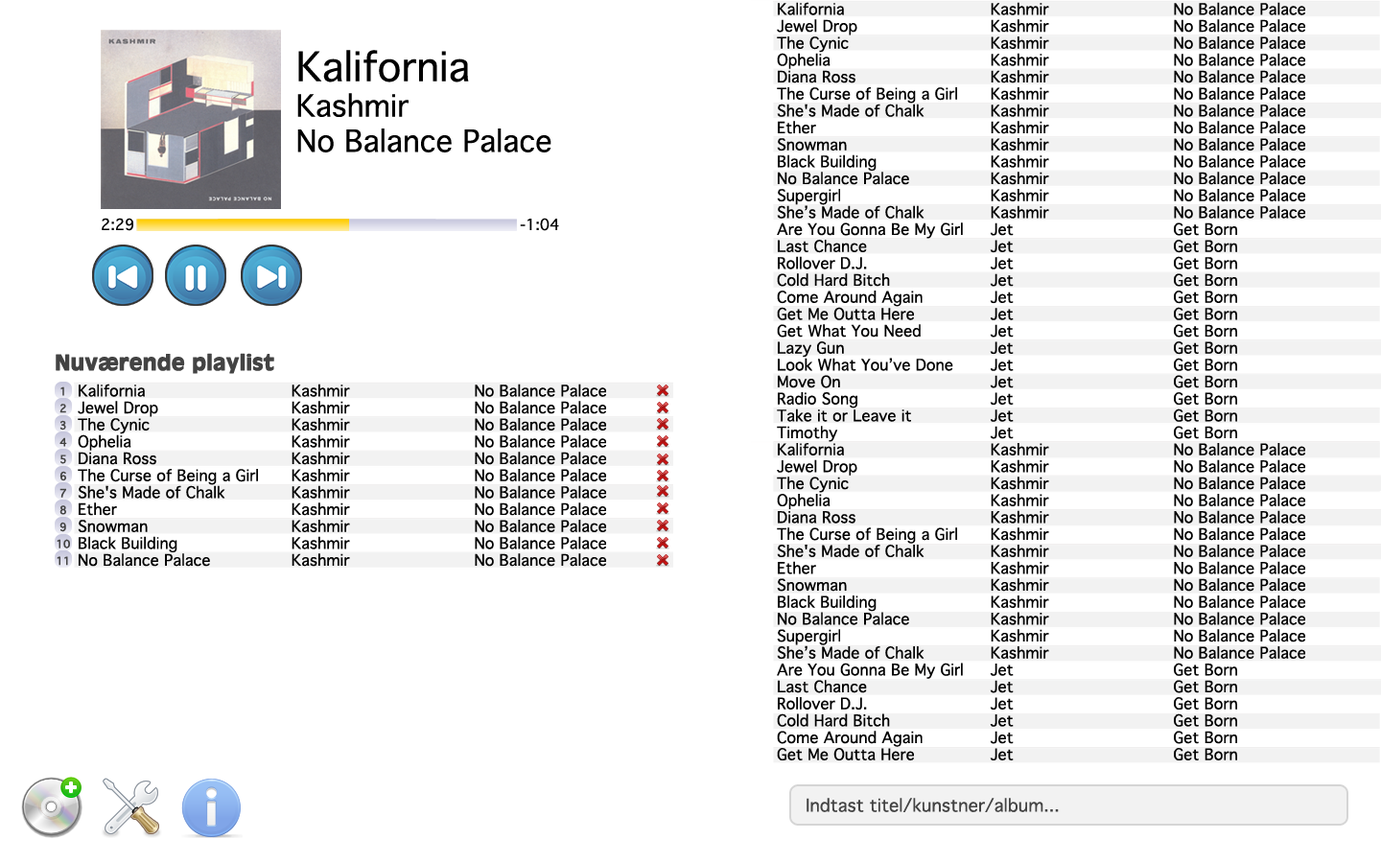
<style>
.page{position:relative;width:1381px;height:863px;background:#ffffff}
.page>*{position:absolute;margin:0}
.t1{font:15.3px/16.9px "Thonburi";color:#000000}
.t2{font:29.4px "Thonburi";color:#000000}
.t3{font:39.2px "Thonburi";color:#000000}
.t4{font:14.7px "Thonburi";color:#000000}
.t5{font:23px "Antique-Olive-Bold";color:#434343;font-weight:bold}
.t6{font:10.6px/16.9px "Thonburi";color:#434343;font-weight:bold}
.t7{font:17.3px "Thonburi";color:#434343}
</style>
<div class="page">
<p class="t1" style="left:777px;top:2px;width:528px;height:759px">Kalifornia     Kashmir     No Balance Palace<br>Jewel Drop     Kashmir     No Balance Palace<br>The Cynic     Kashmir     No Balance Palace<br>Ophelia      Kashmir     No Balance Palace<br>Diana Ross     Kashmir     No Balance Palace<br>The Curse of Being a Girl  Kashmir     No Balance Palace<br>She's Made of Chalk   Kashmir     No Balance Palace<br>Ether      Kashmir     No Balance Palace<br>Snowman     Kashmir     No Balance Palace<br>Black Building    Kashmir     No Balance Palace<br>No Balance Palace   Kashmir     No Balance Palace<br>Supergirl     Kashmir     No Balance Palace<br>She’s Made of Chalk   Kashmir     No Balance Palace<br>Are You Gonna Be My Girl Jet      Get Born<br>Last Chance     Jet      Get Born<br>Rollover D.J.     Jet      Get Born<br>Cold Hard Bitch    Jet      Get Born<br>Come Around Again   Jet      Get Born<br>Get Me Outta Here   Jet      Get Born<br>Get What You Need   Jet      Get Born<br>Lazy Gun     Jet      Get Born<br>Look What You’ve Done  Jet      Get Born<br>Move On     Jet      Get Born<br>Radio Song     Jet      Get Born<br>Take it or Leave it   Jet      Get Born<br>Timothy      Jet      Get Born<br>Kalifornia     Kashmir     No Balance Palace<br>Jewel Drop     Kashmir     No Balance Palace<br>The Cynic     Kashmir     No Balance Palace<br>Ophelia      Kashmir     No Balance Palace<br>Diana Ross     Kashmir     No Balance Palace<br>The Curse of Being a Girl  Kashmir     No Balance Palace<br>She's Made of Chalk   Kashmir     No Balance Palace<br>Ether      Kashmir     No Balance Palace<br>Snowman     Kashmir     No Balance Palace<br>Black Building    Kashmir     No Balance Palace<br>No Balance Palace   Kashmir     No Balance Palace<br>Supergirl     Kashmir     No Balance Palace<br>She’s Made of Chalk   Kashmir     No Balance Palace<br>Are You Gonna Be My Girl Jet      Get Born<br>Last Chance     Jet      Get Born<br>Rollover D.J.     Jet      Get Born<br>Cold Hard Bitch    Jet      Get Born<br>Come Around Again   Jet      Get Born<br>Get Me Outta Here   Jet      Get Born</p>
<p class="t2" style="left:297px;top:50px;width:255px;height:103px"><span class="t3">Kalifornia<br></span>Kashmir<br>No Balance Palace</p>
<p class="t4" style="left:102px;top:218px;width:31px;height:13px">2:29</p>
<p class="t4" style="left:520px;top:218px;width:39px;height:13px">-1:04</p>
<p class="t5" style="left:56px;top:353px;width:218px;height:21px">Nuværende playlist</p>
<p class="t6" style="left:57px;top:387px;width:13px;height:179px;text-align:center">1<br>2<br>3<br>4<br>5<br>6<br>7<br>8<br>9<br>10<br>11</p>
<p class="t1" style="left:78px;top:384px;width:528px;height:183px">Kalifornia     Kashmir     No Balance Palace<br>Jewel Drop     Kashmir     No Balance Palace<br>The Cynic     Kashmir     No Balance Palace<br>Ophelia      Kashmir     No Balance Palace<br>Diana Ross     Kashmir     No Balance Palace<br>The Curse of Being a Girl  Kashmir     No Balance Palace<br>She's Made of Chalk   Kashmir     No Balance Palace<br>Ether      Kashmir     No Balance Palace<br>Snowman     Kashmir     No Balance Palace<br>Black Building    Kashmir     No Balance Palace<br>No Balance Palace   Kashmir     No Balance Palace</p>
<p class="t7" style="left:807px;top:798px;width:252px;height:14px">Indtast titel/kunstner/album...</p>
</div>
